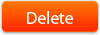
<style>
.page{position:relative;width:100px;height:35px}
.page>*{position:absolute;margin:0}
.t1{font:17.5px "MyriadPro-Regular";color:#ffffff}
</style>
<div class="page">
<p class="t1" style="left:27px;top:11px;width:46px;height:13px">Delete</p>
</div>
